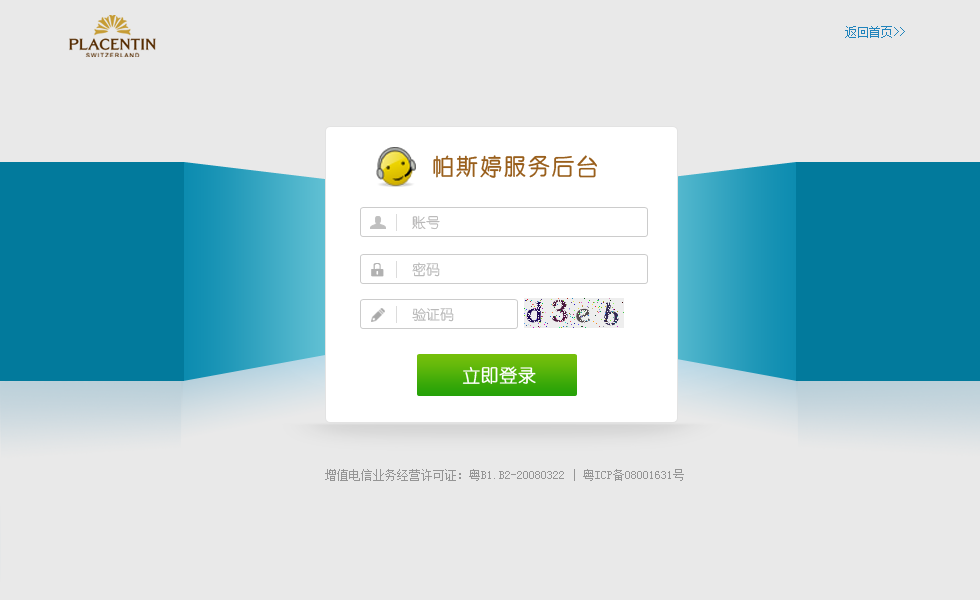
<style>
.page{position:relative;width:980px;height:600px;background:#e9e9e9}
.page>*{position:absolute;margin:0}
.t1{font:12px "SimSun";color:#2184bc}
.t2{font:24px "CTZhongYuanSJ";color:#995f1c}
.t3{font:14px "YouYuan";color:#b5b5b5}
.t4{font:18px "YouYuan";color:#ffffff;font-weight:bold}
.t5{font:12px "SimSun";color:#969696}
</style>
<div class="page">
<p class="t1" style="left:845px;top:26px;width:60px;height:12px">返回首页&gt;&gt;</p>
<p class="t2" style="left:433px;top:155px;width:164px;height:23px">帕斯婷服务后台</p>
<p class="t3" style="left:412px;top:215px;width:28px;height:15px">账号</p>
<p class="t3" style="left:412px;top:262px;width:28px;height:15px">密码</p>
<p class="t3" style="left:412px;top:308px;width:42px;height:14px">验证码</p>
<p class="t4" style="left:462px;top:366px;width:74px;height:18px">立即登录</p>
<p class="t5" style="left:325px;top:469px;width:359px;height:12px">增值电信业务经营许可证：粤B1.B2-20080322 | 粤ICP备08001631号</p>
</div>
